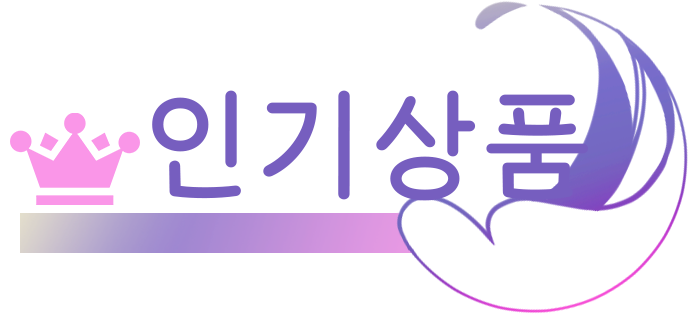
<style>
.page{position:relative;width:700px;height:318px;background:#ffffff}
.page>*{position:absolute;margin:0}
.t1{font:119.6px "MapoPeacefull";color:#765ebf;font-weight:bold}
</style>
<div class="page">
<p class="t1" style="left:152px;top:90px;width:436px;height:111px">인기상품</p>
</div>
